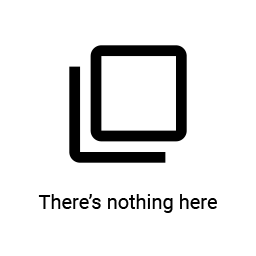
<style>
.page{position:relative;width:256px;height:256px;background:#ffffff}
.page>*{position:absolute;margin:0}
.t1{font:20px "Roboto-Regular";color:#000000}
</style>
<div class="page">
<p class="t1" style="left:38px;top:194px;width:179px;height:19px">There’s nothing here</p>
</div>
